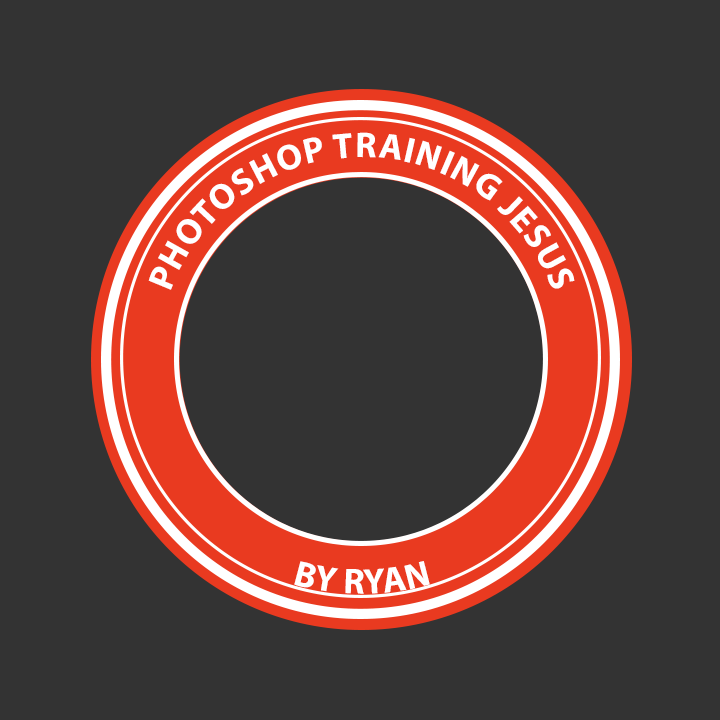
<style>
.page{position:relative;width:720px;height:720px;background:#333333}
.page>*{position:absolute;margin:0}
.t1{font:36px "MyriadPro-Bold";letter-spacing:0.01em;color:#ffffff;text-transform:uppercase}
</style>
<div class="page">
<p class="t1" style="left:148px;top:132px;width:427px;height:158px;text-align:center">Photoshop training jesus</p>
<p class="t1" style="left:294px;top:561px;width:136px;height:33px">By Ryan</p>
</div>
